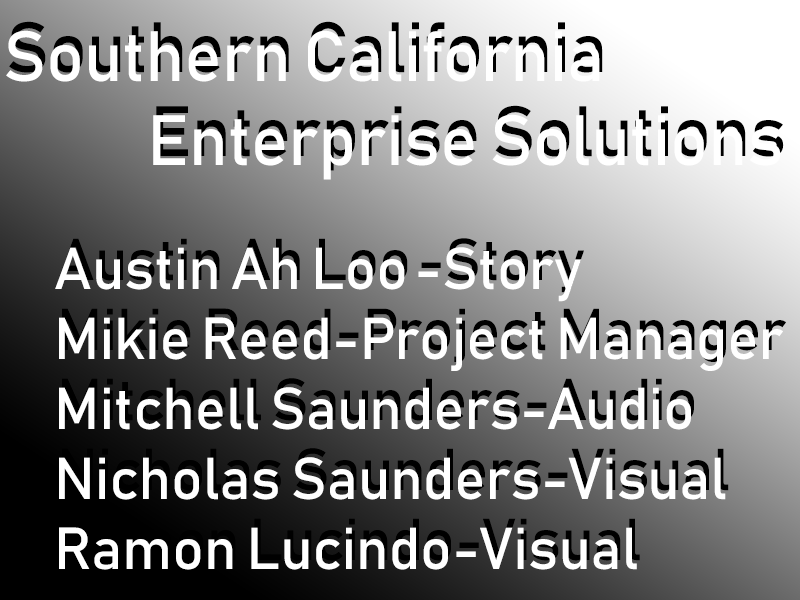
<style>
.page{position:relative;width:800px;height:600px}
.page>*{position:absolute;margin:0}
.t1{font:70px "Bahnschrift";color:#ffffff;font-style:italic}
.t2{font:70px "Bahnschrift";color:#000000;font-style:italic}
.t3{font:58.3px "Bahnschrift";color:#000000;font-style:italic}
.t4{font:58.3px "Bahnschrift";color:#ffffff;font-style:italic}
</style>
<div class="page">
<p class="t1" style="left:6px;top:30px;width:775px;height:150px">Southern California<br>    Enterprise Solutions</p>
<p class="t2" style="left:9px;top:21px;width:775px;height:150px">Southern California<br>    Enterprise Solutions</p>
<p class="t3" style="left:58px;top:238px;width:728px;height:323px">Austin Ah Loo -Story<br>Mikie Reed-Project Manager<br>Mitchell Saunders-Audio<br>Nicholas Saunders-Visual<br>Ramon Lucindo-Visual</p>
<p class="t4" style="left:55px;top:247px;width:728px;height:323px">Austin Ah Loo -Story<br>Mikie Reed-Project Manager<br>Mitchell Saunders-Audio<br>Nicholas Saunders-Visual<br>Ramon Lucindo-Visual</p>
</div>
